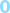
<style>
.page{position:relative;width:10px;height:13px;background:#8dd9ff}
.page>*{position:absolute;margin:0}
.t1{font:20px "MyriadPro-Bold";color:#8dd9ff}
</style>
<div class="page">
<p class="t1" style="left:0px;top:0px;width:10px;height:13px">0</p>
</div>
